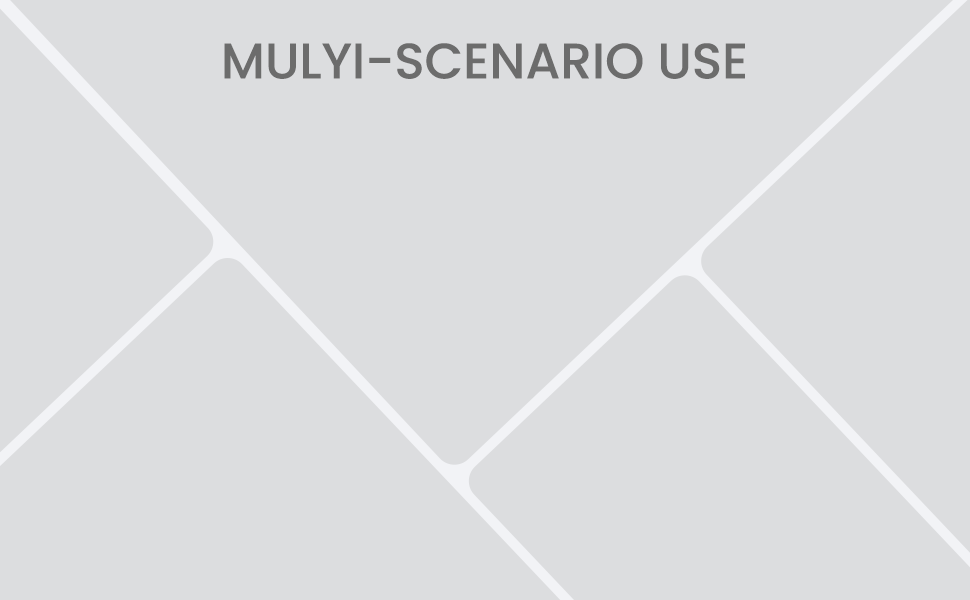
<style>
.page{position:relative;width:970px;height:600px;background:#dcdddf}
.page>*{position:absolute;margin:0}
.t1{font:50px "Poppins-Medium";color:#6c6c6c;text-transform:uppercase}
</style>
<div class="page">
<p class="t1" style="left:224px;top:43px;width:521px;height:36px">MULYI-SCENARIO USE</p>
</div>
